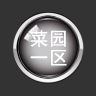
<style>
.page{position:relative;width:96px;height:96px;background:#333333}
.page>*{position:absolute;margin:0}
.t1{font:18px "SimHei";letter-spacing:0.075em;color:#ffffff}
</style>
<div class="page">
<p class="t1" style="left:30px;top:30px;width:36px;height:17px">菜园</p>
<p class="t1" style="left:30px;top:50px;width:37px;height:16px">一区</p>
</div>
